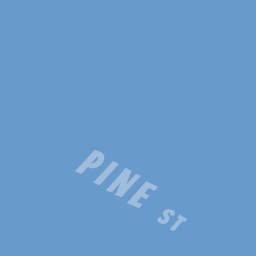
<style>
.page{position:relative;width:256px;height:256px;background:#689bcb}
.page>*{position:absolute;margin:0}
.t1{font:40px "Bangers-Regular";letter-spacing:0.16em;color:#9fbddb}
.t2{font:24px "Bangers-Regular";letter-spacing:0.16em;color:#9fbddb}
</style>
<div class="page">
<p class="t1" style="left:75px;top:150px;width:113px;height:81px;rotate:31deg">PINE <span class="t2">ST</span></p>
</div>
